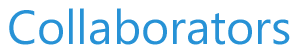
<style>
.page{position:relative;width:300px;height:52px;background:#ffffff}
.page>*{position:absolute;margin:0}
.t1{font:48px "LaoUI";color:#2792d6}
</style>
<div class="page">
<p class="t1" style="left:9px;top:8px;width:281px;height:37px">Collaborators</p>
</div>
